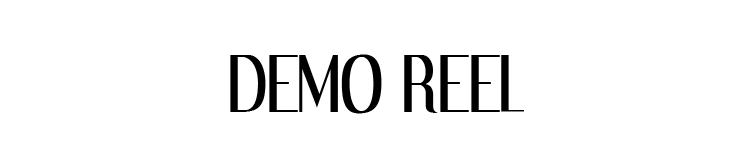
<style>
.page{position:relative;width:752px;height:148px;background:#ffffff}
.page>*{position:absolute;margin:0}
.t1{font:66.7px "DreamOrphans-Regular";color:#000000}
</style>
<div class="page">
<p class="t1" style="left:230px;top:54px;width:294px;height:60px">DEMO REEL</p>
</div>
